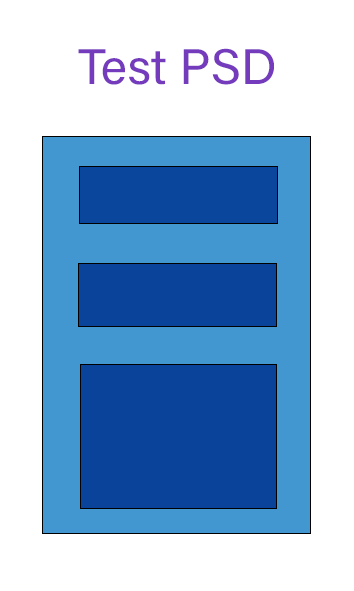
<style>
.page{position:relative;width:354px;height:591px;background:#ffffff}
.page>*{position:absolute;margin:0}
.t1{font:49.9px "AcuminConcept-Regular";color:#743bbc}
</style>
<div class="page">
<p class="t1" style="left:78px;top:48px;width:196px;height:37px">Test PSD</p>
</div>
